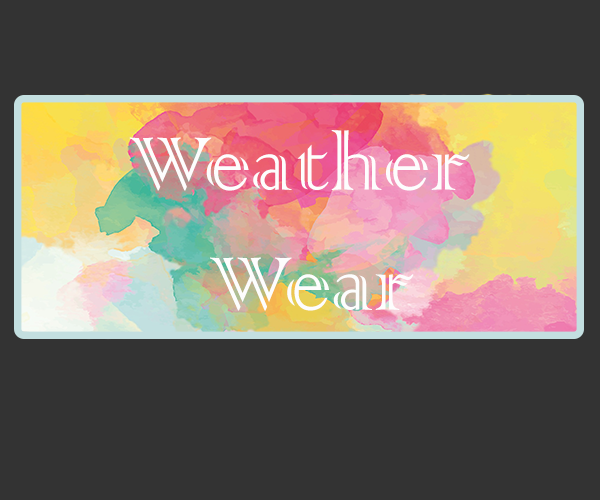
<style>
.page{position:relative;width:600px;height:500px;background:#333333}
.page>*{position:absolute;margin:0}
.t1{font:100px "ColonnaMT";color:#fdfdfd}
</style>
<div class="page">
<p class="t1" style="left:129px;top:130px;width:341px;height:181px;text-align:center">Weather <br>Wear</p>
</div>
